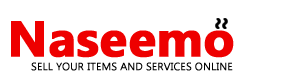
<style>
.page{position:relative;width:300px;height:80px;background:#ffffff}
.page>*{position:absolute;margin:0}
.t1{font:50px "Ebrima-Bold";color:#ee0000;font-weight:bold}
.t2{font:10.4px "Ebrima";color:#000000;font-weight:bold}
</style>
<div class="page">
<p class="t1" style="left:11px;top:21px;width:223px;height:37px">Naseemo</p>
<p class="t2" style="left:31px;top:62px;width:202px;height:9px">SELL YOUR ITEMS AND SERVICES ONLINE</p>
</div>
